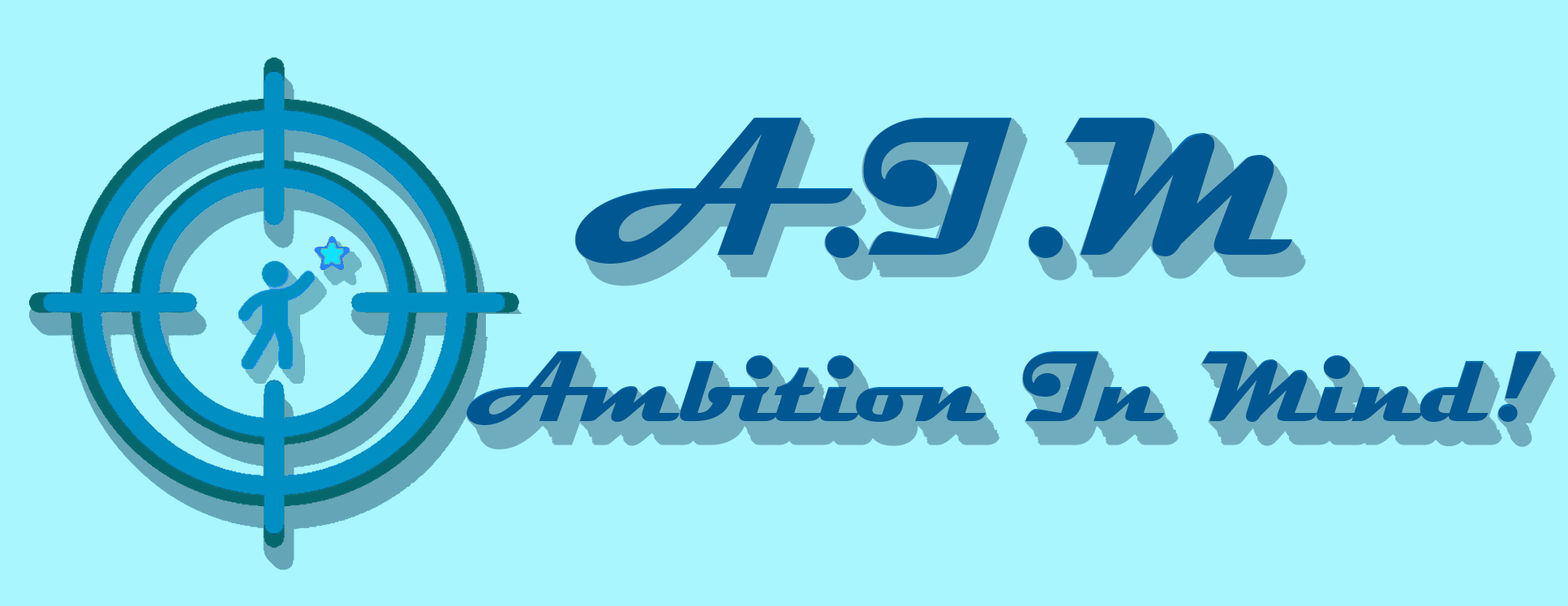
<style>
.page{position:relative;width:1568px;height:606px;background:#aaf6ff}
.page>*{position:absolute;margin:0}
.t1{font:199.2px "Magneto-Bold";color:#005792}
.t2{font:101.4px "Magneto-Bold";color:#005792}
</style>
<div class="page">
<p class="t1" style="left:575px;top:118px;width:717px;height:146px">A.I.M</p>
<p class="t2" style="left:466px;top:351px;width:1076px;height:74px">Ambition In Mind!</p>
</div>
